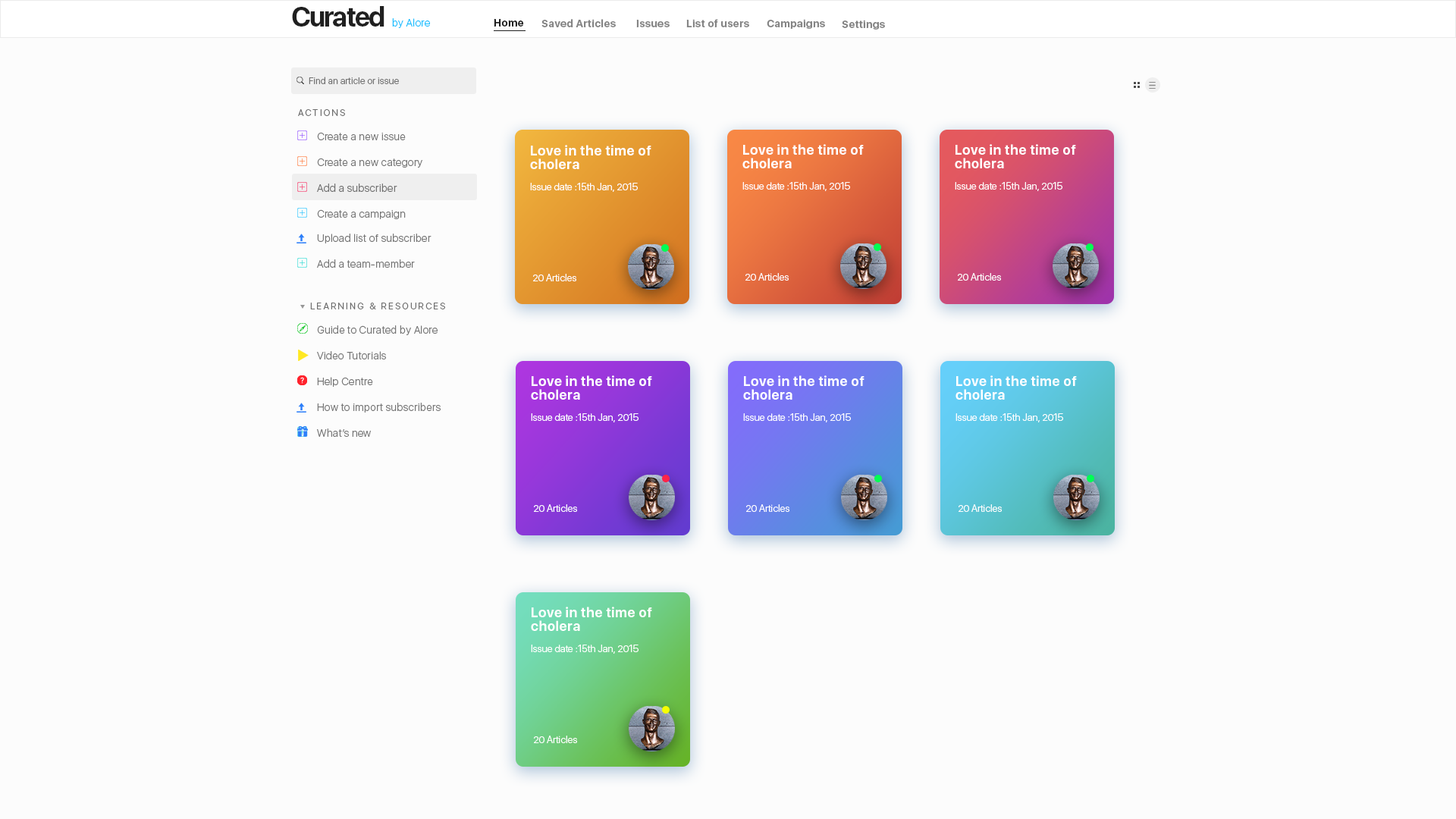
<style>
.page{position:relative;width:1456px;height:819px;background:#fcfcfc}
.page>*{position:absolute;margin:0}
.t1{font:27.3px "SFUIDisplay-Bold";letter-spacing:-0.05em;color:#202020}
.t2{font:10.6px "SFUIDisplay-Light";letter-spacing:0.025em;color:#18bfff}
.t3{font:10.6px "SFUIDisplay-Bold";letter-spacing:0.025em;color:#202020}
.t4{font:10.6px "SFUIDisplay-Bold";letter-spacing:0.025em;color:#848484}
.t5{font:9.1px "SFUIDisplay-Light";letter-spacing:0.025em;color:#727272}
.t6{font:9.1px "SFUIDisplay-Light";letter-spacing:0.2em;color:#6d6d6d}
.t7{font:10.6px "SFUIDisplay-Light";letter-spacing:0.025em;color:#767676}
.t8{font:13.6px/13.6px "SFUIDisplay-Bold";letter-spacing:0.025em;color:#ffffff}
.t9{font:10.6px "SFUIDisplay-Light";letter-spacing:0.025em;color:#727272}
.t10{font:9.9px "SFUIDisplay-Light";color:#ffffff}
</style>
<div class="page">
<p class="t1" style="left:292px;top:6px;width:92px;height:21px">Curated</p>
<p class="t2" style="left:392px;top:18px;width:38px;height:10px">by Alore</p>
<p class="t3" style="left:494px;top:19px;width:30px;height:8px">Home</p>
<p class="t4" style="left:541px;top:19px;width:75px;height:8px">Saved Articles</p>
<p class="t4" style="left:636px;top:20px;width:34px;height:7px">Issues</p>
<p class="t4" style="left:686px;top:19px;width:63px;height:8px">List of users</p>
<p class="t4" style="left:767px;top:19px;width:58px;height:10px">Campaigns</p>
<p class="t4" style="left:842px;top:20px;width:43px;height:10px">Settings</p>
<p class="t5" style="left:309px;top:77px;width:90px;height:7px">Find an article or issue</p>
<p class="t6" style="left:298px;top:109px;width:47px;height:7px">ACTIONS</p>
<p class="t7" style="left:317px;top:132px;width:89px;height:8px">Create a new issue</p>
<p class="t8" style="left:530px;top:145px;width:121px;height:24px">Love in the time of cholera</p>
<p class="t8" style="left:742px;top:144px;width:122px;height:24px">Love in the time of cholera</p>
<p class="t8" style="left:955px;top:144px;width:121px;height:24px">Love in the time of cholera</p>
<p class="t7" style="left:317px;top:158px;width:105px;height:10px">Create a new category</p>
<p class="t9" style="left:317px;top:184px;width:80px;height:8px">Add a subscriber</p>
<p class="t10" style="left:530px;top:183px;width:108px;height:9px">Issue date :15th Jan, 2015</p>
<p class="t10" style="left:742px;top:182px;width:108px;height:9px">Issue date :15th Jan, 2015</p>
<p class="t10" style="left:955px;top:182px;width:107px;height:9px">Issue date :15th Jan, 2015</p>
<p class="t7" style="left:317px;top:209px;width:89px;height:10px">Create a campaign</p>
<p class="t7" style="left:317px;top:234px;width:114px;height:9px">Upload list of subscriber</p>
<p class="t7" style="left:317px;top:259px;width:98px;height:9px">Add a team-member</p>
<p class="t10" style="left:533px;top:274px;width:43px;height:7px">20 Articles</p>
<p class="t10" style="left:745px;top:273px;width:44px;height:8px">20 Articles</p>
<p class="t10" style="left:958px;top:273px;width:43px;height:8px">20 Articles</p>
<p class="t6" style="left:310px;top:303px;width:135px;height:6px">LEARNING &amp; RESOURCES</p>
<p class="t7" style="left:317px;top:325px;width:121px;height:10px">Guide to Curated by Alore</p>
<p class="t7" style="left:317px;top:351px;width:69px;height:8px">Video Tutorials</p>
<p class="t7" style="left:317px;top:377px;width:56px;height:10px">Help Centre</p>
<p class="t8" style="left:531px;top:375px;width:121px;height:25px">Love in the time of cholera</p>
<p class="t8" style="left:743px;top:375px;width:121px;height:25px">Love in the time of cholera</p>
<p class="t8" style="left:955px;top:375px;width:122px;height:25px">Love in the time of cholera</p>
<p class="t7" style="left:317px;top:403px;width:124px;height:10px">How to import subscribers</p>
<p class="t10" style="left:531px;top:413px;width:108px;height:9px">Issue date :15th Jan, 2015</p>
<p class="t10" style="left:743px;top:413px;width:108px;height:9px">Issue date :15th Jan, 2015</p>
<p class="t10" style="left:955px;top:413px;width:108px;height:9px">Issue date :15th Jan, 2015</p>
<p class="t7" style="left:317px;top:428px;width:54px;height:9px">What’s new</p>
<p class="t10" style="left:534px;top:504px;width:43px;height:8px">20 Articles</p>
<p class="t10" style="left:746px;top:504px;width:43px;height:8px">20 Articles</p>
<p class="t10" style="left:959px;top:504px;width:43px;height:8px">20 Articles</p>
<p class="t8" style="left:531px;top:607px;width:121px;height:24px">Love in the time of cholera</p>
<p class="t10" style="left:531px;top:645px;width:108px;height:9px">Issue date :15th Jan, 2015</p>
<p class="t10" style="left:534px;top:736px;width:43px;height:7px">20 Articles</p>
</div>
